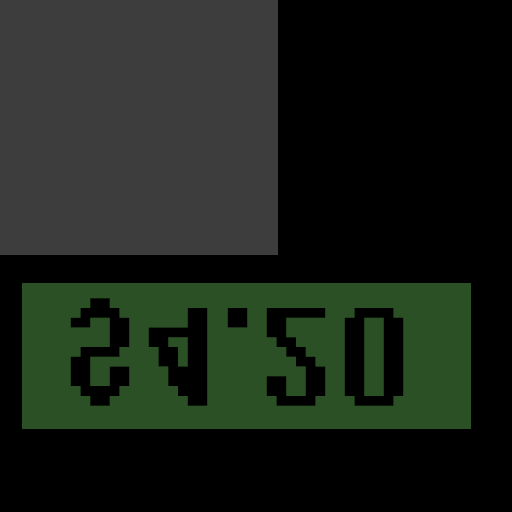
<style>
.page{position:relative;width:512px;height:512px;background:#000000}
.page>*{position:absolute;margin:0}
.t1{font:125px "System";color:#000000}
</style>
<div class="page">
<p class="t1" style="left:70px;top:298px;width:334px;height:108px">$4.20</p>
</div>
